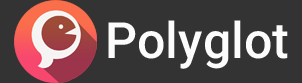
<style>
.page{position:relative;width:302px;height:83px;background:#333333}
.page>*{position:absolute;margin:0}
.t1{font:50px "Roboto-Medium";color:#fcfcfc}
</style>
<div class="page">
<p class="t1" style="left:108px;top:20px;width:180px;height:49px">Polyglot</p>
</div>
